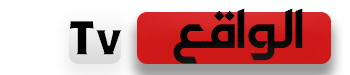
<style>
.page{position:relative;width:350px;height:75px;background:#ffffff}
.page>*{position:absolute;margin:0}
.t1{font:48.3px "DGHeaven";color:#000000}
.t2{font:49.3px "DGModal3at";color:#000000}
</style>
<div class="page">
<p class="t1" style="left:173px;top:8px;width:130px;height:56px">الواقع</p>
<p class="t2" style="left:70px;top:21px;width:52px;height:34px">Tv</p>
</div>
